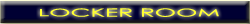
<style>
.page{position:relative;width:250px;height:24px}
.page>*{position:absolute;margin:0}
.t1{font:9.5px "CenturyGothic";color:#ffff33;scale:2.58 1}
</style>
<div class="page">
<p class="t1" style="left:40px;top:8px;width:179px;height:9px">LOCKER ROOM</p>
</div>
